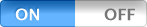
<style>
.page{position:relative;width:147px;height:27px}
.page>*{position:absolute;margin:0}
.t1{font:16px "LucidaGrande-Bold";color:#ffffff}
.t2{font:16px "LucidaGrande-Bold";color:#757575}
</style>
<div class="page">
<p class="t1" style="left:15px;top:8px;width:24px;height:13px">ON</p>
<p class="t2" style="left:104px;top:8px;width:31px;height:13px">OFF</p>
</div>
